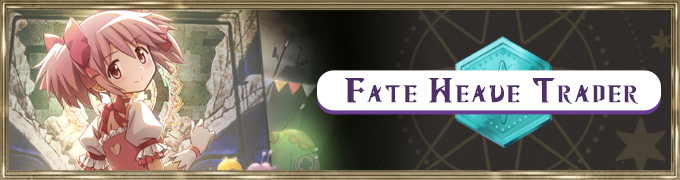
<style>
.page{position:relative;width:680px;height:180px}
.page>*{position:absolute;margin:0}
.t1{font:32.5px "MagiaRecordRegular";color:#4f2f68;font-variant:small-caps;font-weight:bold;scale:1.25 1}
</style>
<div class="page">
<p class="t1" style="left:345px;top:78px;width:293px;height:26px">Fate Weave Trader</p>
</div>
